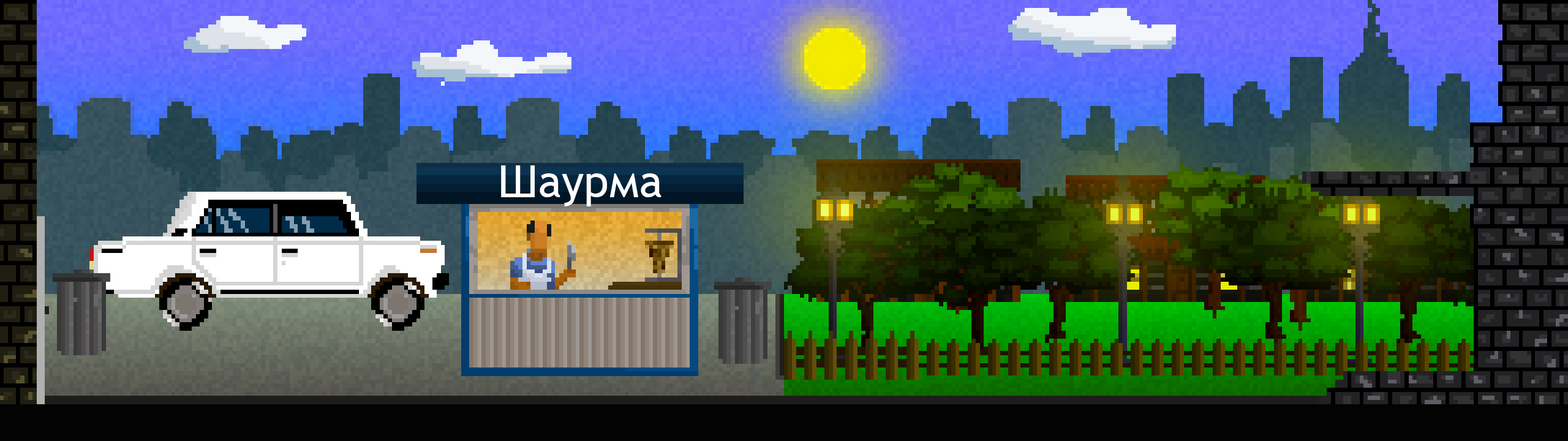
<style>
.page{position:relative;width:1568px;height:441px}
.page>*{position:absolute;margin:0}
.t1{font:44.9px "TrebuchetMS";color:#fefefe}
</style>
<div class="page">
<p class="t1" style="left:501px;top:165px;width:161px;height:41px">Шаурма</p>
</div>
